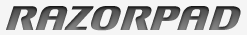
<style>
.page{position:relative;width:247px;height:35px;background:#f5f5f5}
.page>*{position:absolute;margin:0}
.t1{font:54px "Motorwerk";color:#565656}
</style>
<div class="page">
<p class="t1" style="left:6px;top:6px;width:235px;height:25px">Razorpad</p>
</div>
